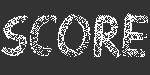
<style>
.page{position:relative;width:150px;height:75px;background:#333333}
.page>*{position:absolute;margin:0}
.t1{font:58px "Drawing-Guides";color:#ffffff;scale:1.06 1}
</style>
<div class="page">
<p class="t1" style="left:1px;top:13px;width:147px;height:45px">score</p>
</div>
